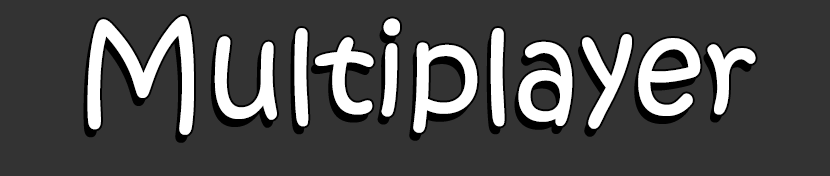
<style>
.page{position:relative;width:830px;height:176px;background:#333333}
.page>*{position:absolute;margin:0}
.t1{font:124.4px "KristenITC-Regular";color:#ffffff}
</style>
<div class="page">
<p class="t1" style="left:87px;top:16px;width:669px;height:119px">Multiplayer</p>
</div>
